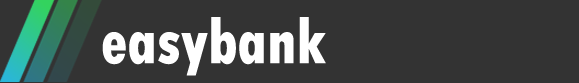
<style>
.page{position:relative;width:579px;height:83px;background:#333333}
.page>*{position:absolute;margin:0}
.t1{font:66.7px "TwCenMT-CondensedExtraBold";color:#ffffff;scale:0.93 1}
</style>
<div class="page">
<p class="t1" style="left:102px;top:17px;width:224px;height:59px">easybank</p>
</div>
